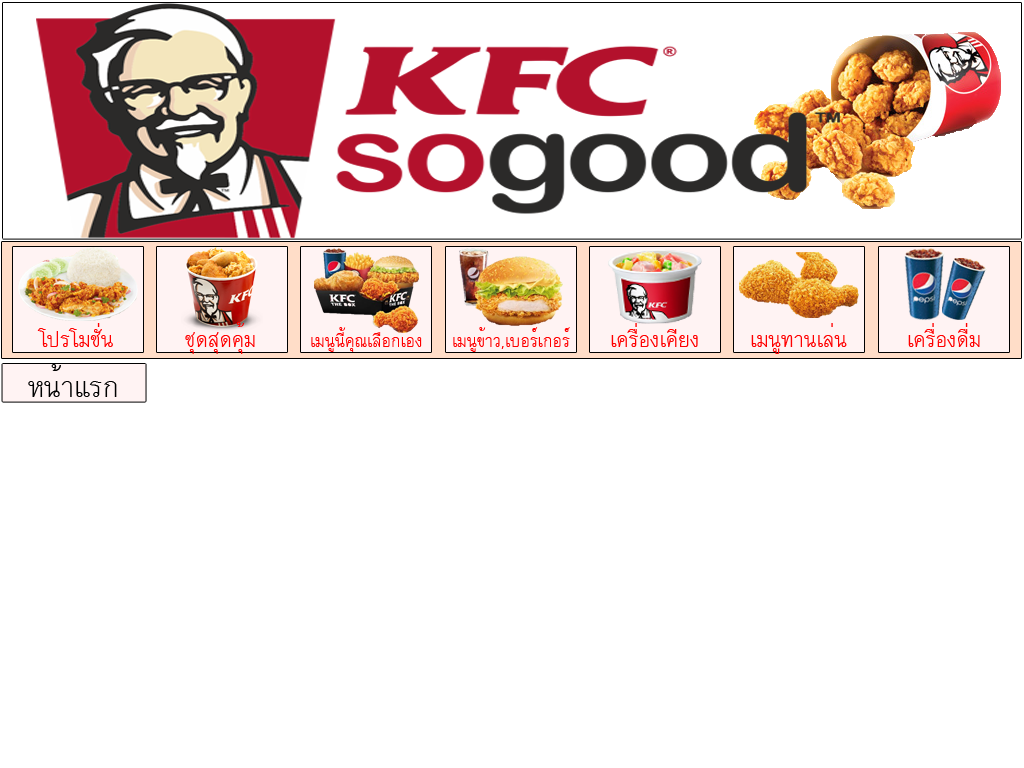
<style>
.page{position:relative;width:1024px;height:768px;background:#ffffff}
.page>*{position:absolute;margin:0}
.t1{font:30px "DSNAnuRak";color:#ff0000}
.t2{font:24px "DSNAnuRak";color:#ff0000}
.t3{font:39.8px "DSUAnuRug";color:#000000}
</style>
<div class="page">
<p class="t1" style="left:37px;top:323px;width:76px;height:24px">โปรโมชั่น</p>
<p class="t1" style="left:185px;top:322px;width:70px;height:32px">ชุดสุดคุ้ม</p>
<p class="t2" style="left:311px;top:327px;width:111px;height:25px">เมนูนี้คุณเลือกเอง</p>
<p class="t2" style="left:453px;top:327px;width:117px;height:25px">เมนูข้าว,เบอร์เกอร์</p>
<p class="t1" style="left:611px;top:323px;width:87px;height:24px">เครื่องเคียง</p>
<p class="t1" style="left:751px;top:323px;width:96px;height:31px">เมนูทานเล่น</p>
<p class="t1" style="left:908px;top:323px;width:72px;height:24px">เครื่องดื่ม</p>
<p class="t3" style="left:28px;top:364px;width:89px;height:33px">หน้าแรก</p>
</div>
